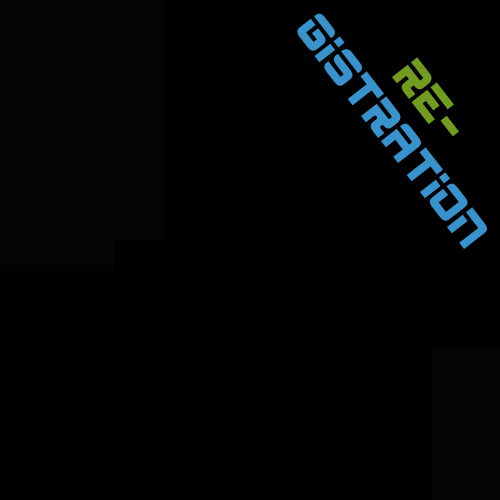
<style>
.page{position:relative;width:500px;height:500px;background:#000000}
.page>*{position:absolute;margin:0}
.t1{font:40px "ESP";color:#3893cc}
.t2{font:40px "ESP";color:#ffffff}
.t3{font:40px "ESP";color:#729c20}
</style>
<div class="page">
<p class="t1" style="left:297px;top:13px;width:190px;height:236px;rotate:52deg"><span class="t2">    </span><span class="t3">Re-<br></span>gistration</p>
</div>
